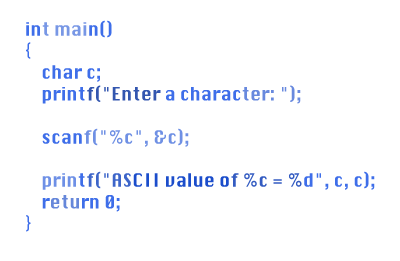
<style>
.page{position:relative;width:400px;height:261px;background:#ffffff}
.page>*{position:absolute;margin:0}
.t1{font:18px "Krungthep";color:#3e6ee9;scale:0.93 1}
.t2{font:18px "Krungthep";color:#7897e5;scale:0.93 1}
.t3{font:18px "Krungthep";color:#3356af;scale:0.93 1}
.t4{font:18px "Krungthep";color:#6889de;scale:0.93 1}
.t5{font:18px "Krungthep";color:#6f90e4;scale:0.93 1}
.t6{font:18px "Krungthep";color:#6e90e6;scale:0.93 1}
.t7{font:18px "Krungthep";color:#3d65c9;scale:0.93 1}
.t8{font:18px "Krungthep";color:#1b4dcb;scale:0.93 1}
.t9{font:18px "Krungthep";color:#335bc1;scale:0.93 1}
.t10{font:18px "Krungthep";color:#6687da;scale:0.93 1}
</style>
<div class="page">
<p class="t1" style="left:26px;top:20px;width:349px;height:212px;text-align:right">in<span class="t2">t mai</span>n()<br>{<br>    char c;<br>    print<span class="t3">f("Enter </span>a charac<span class="t4">ter: ");<br></span><br>    scan<span class="t5">f("%c", &amp;c);  <br>    <br>   </span><span class="t6"> prin</span>t<span class="t7">f("AS</span><span class="t8">CII value o</span><span class="t9">f %c = %</span>d", c, c);<br>    r<span class="t10">etu</span>rn 0;<br>}</p>
</div>
